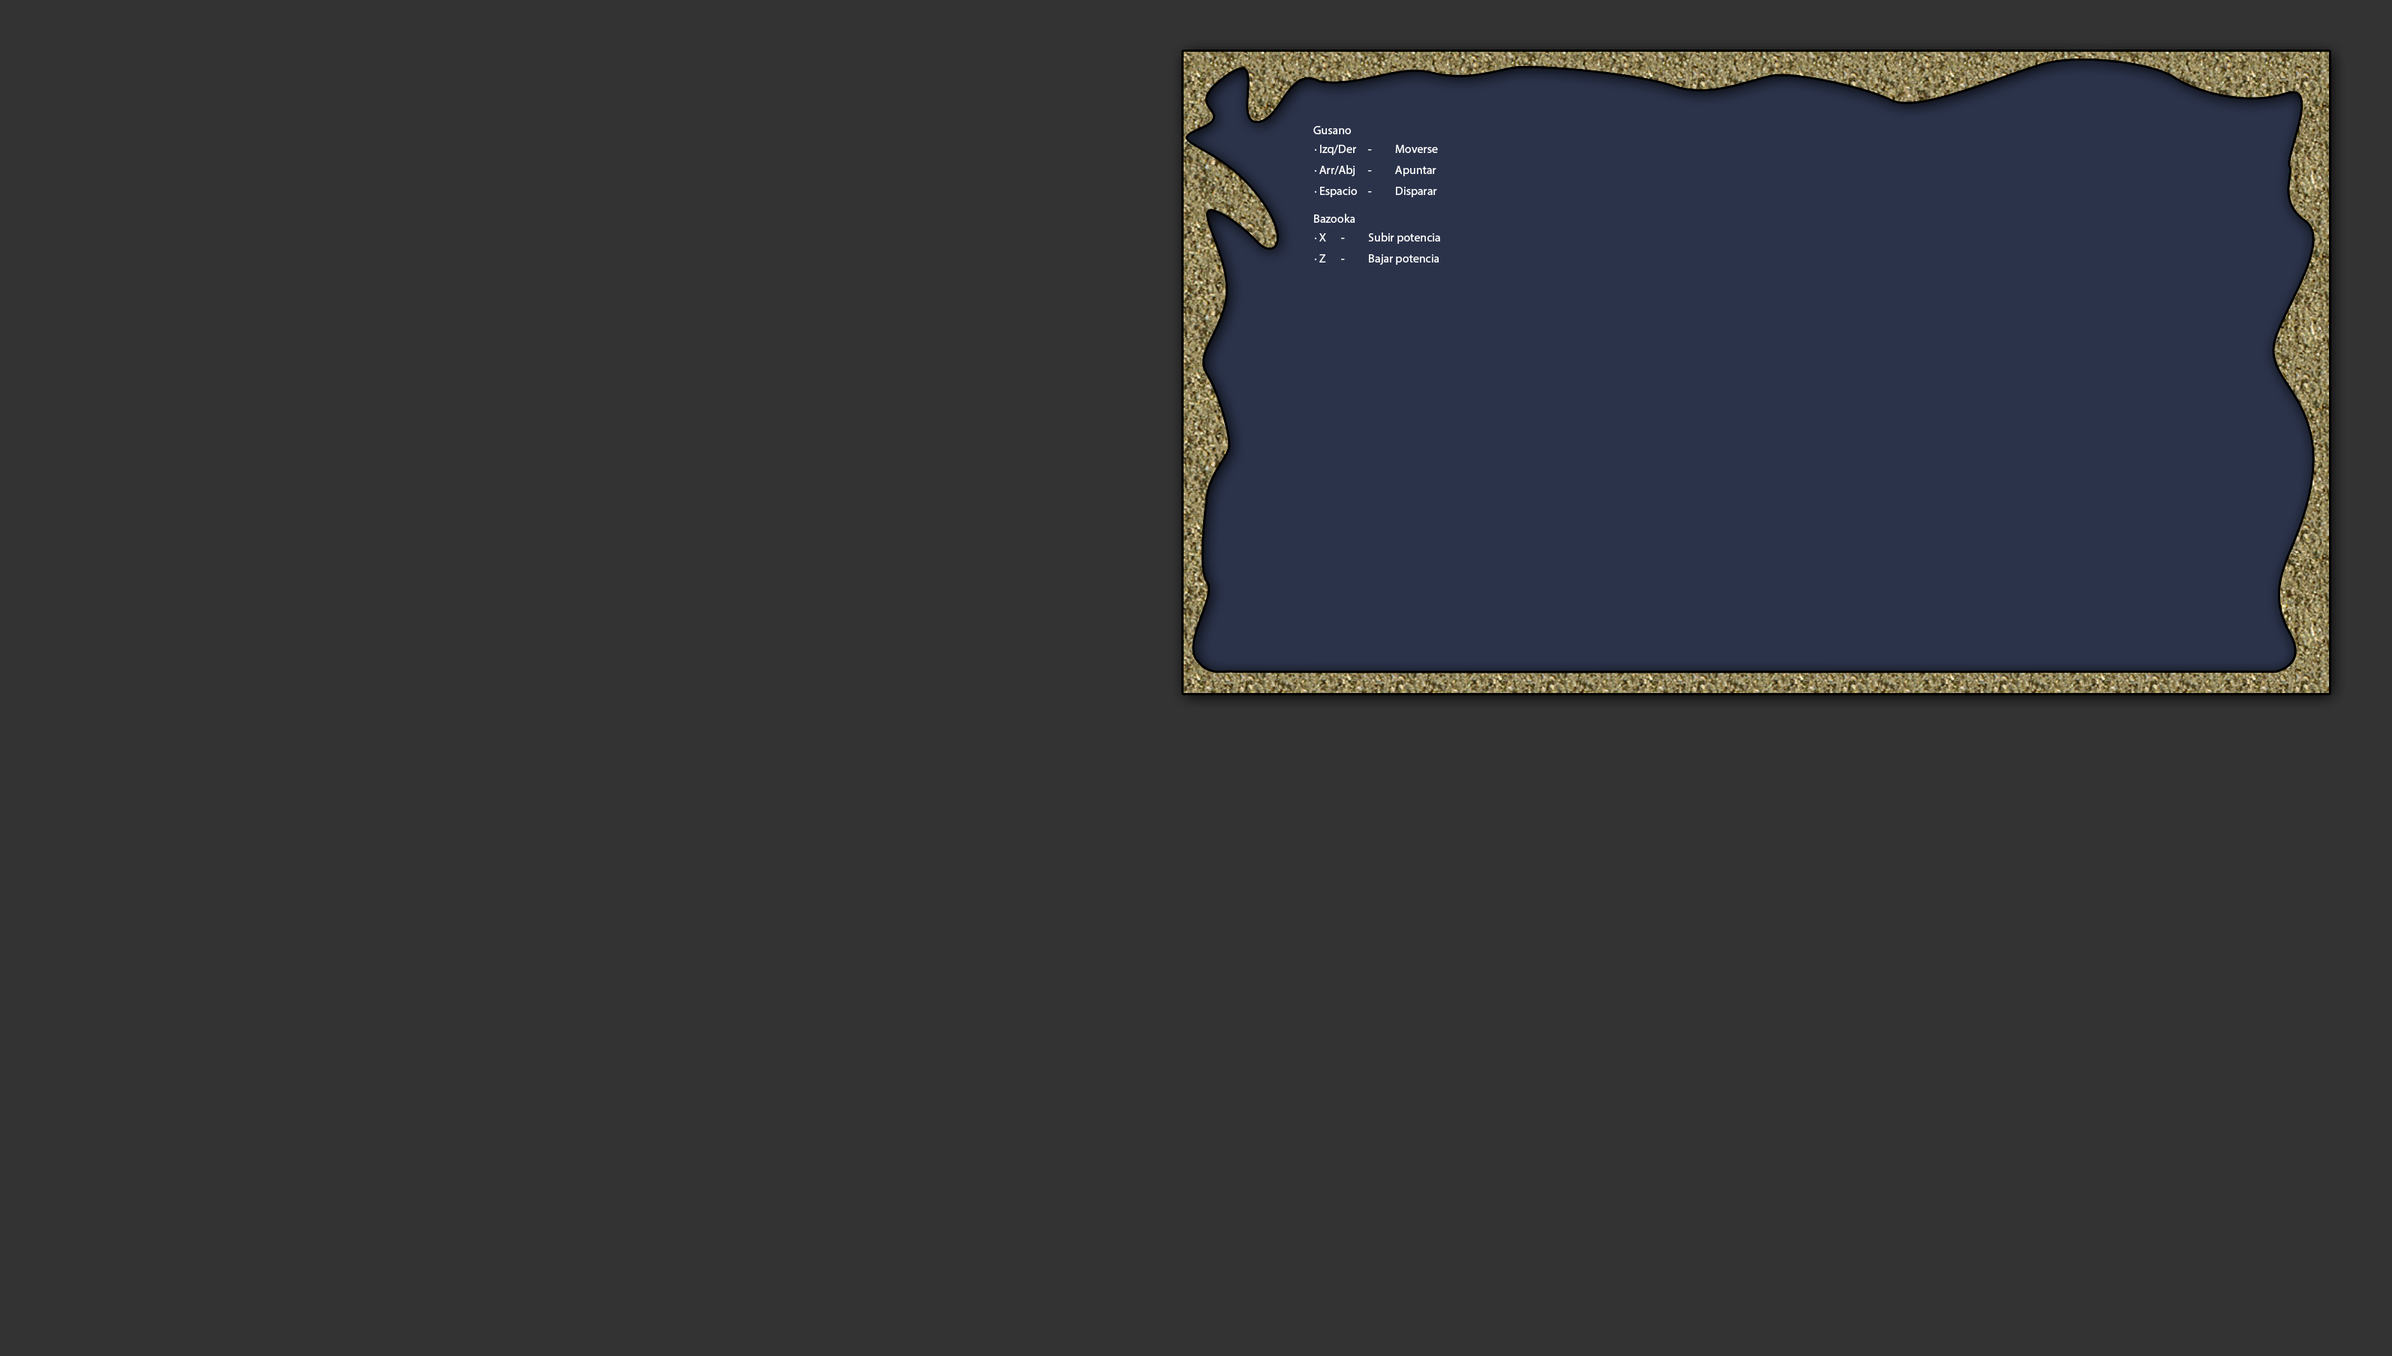
<style>
.page{position:relative;width:2392px;height:1356px;background:#333333}
.page>*{position:absolute;margin:0}
.t1{font:9px "MyriadPro-Regular";color:#ffffff}
</style>
<div class="page">
<p class="t1" style="left:1313px;top:126px;width:38px;height:8px">Gusano</p>
<p class="t1" style="left:1314px;top:145px;width:124px;height:10px">· Izq/Der - Moverse</p>
<p class="t1" style="left:1314px;top:165px;width:122px;height:11px">· Arr/Abj - Apuntar</p>
<p class="t1" style="left:1314px;top:187px;width:123px;height:10px">· Espacio - Disparar</p>
<p class="t1" style="left:1314px;top:214px;width:41px;height:9px">Bazooka</p>
<p class="t1" style="left:1314px;top:232px;width:126px;height:12px">· X - Subir potencia</p>
<p class="t1" style="left:1314px;top:254px;width:125px;height:11px">· Z - Bajar potencia</p>
</div>
